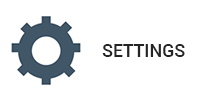
<style>
.page{position:relative;width:200px;height:100px;background:#ffffff}
.page>*{position:absolute;margin:0}
.t1{font:18px "Roboto-Medium";color:#242424}
</style>
<div class="page">
<p class="t1" style="left:102px;top:44px;width:83px;height:13px">SETTINGS</p>
</div>
